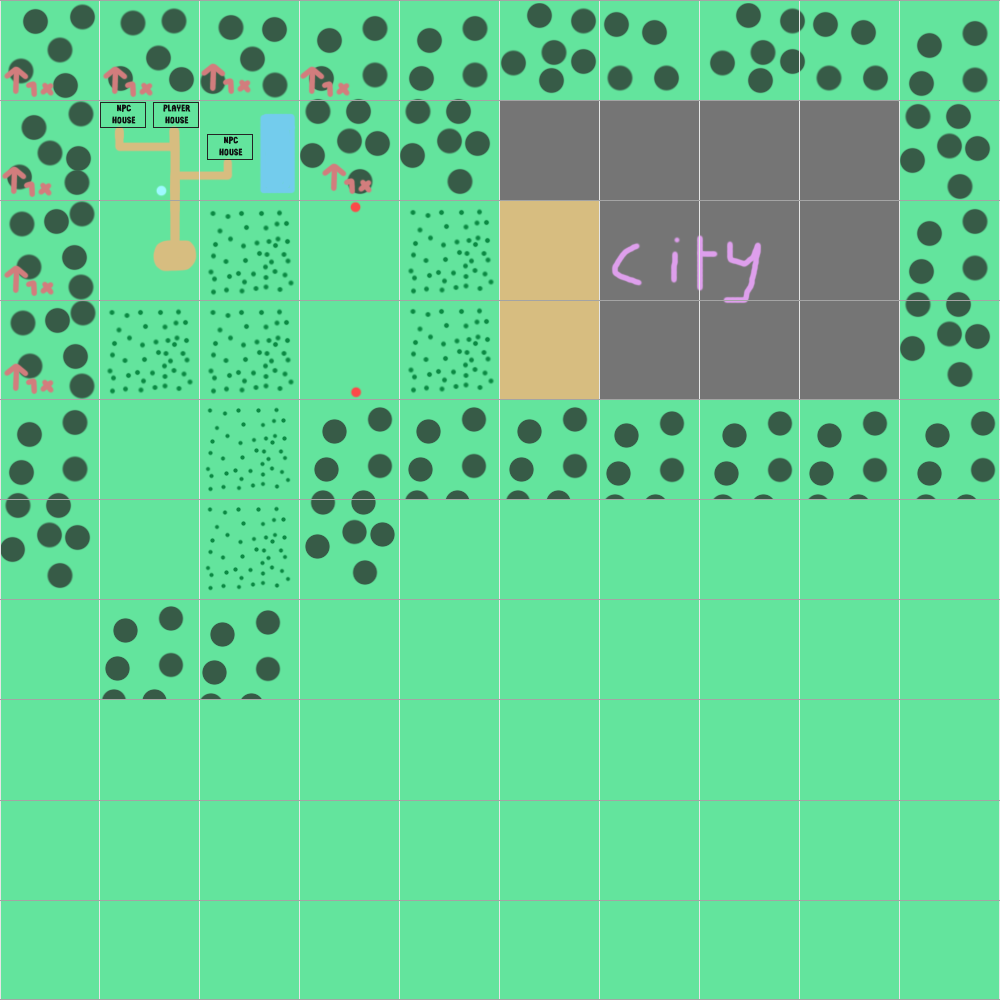
<style>
.page{position:relative;width:1000px;height:1000px;background:#63e49d}
.page>*{position:absolute;margin:0}
.t1{font:10px "SunshineFormulaDEMO-Regular";color:#111214}
</style>
<div class="page">
<p class="t1" style="left:112px;top:104px;width:24px;height:20px;text-align:center">npc<br>house</p>
<p class="t1" style="left:163px;top:104px;width:28px;height:20px;text-align:center">Player<br>house</p>
<p class="t1" style="left:219px;top:136px;width:24px;height:20px;text-align:center">npc<br>house</p>
</div>
